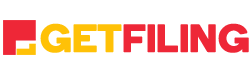
<style>
.page{position:relative;width:250px;height:70px;background:#ffffff}
.page>*{position:absolute;margin:0}
.t1{font:37.7px "GDBoing-Bold";color:#ee2737;font-variant:small-caps;font-weight:bold}
.t2{font:37.7px "GDBoing-Bold";color:#ffc107;font-variant:small-caps;font-weight:bold}
</style>
<div class="page">
<p class="t1" style="left:40px;top:23px;width:209px;height:30px"><span class="t2">GET</span>FILING</p>
</div>
